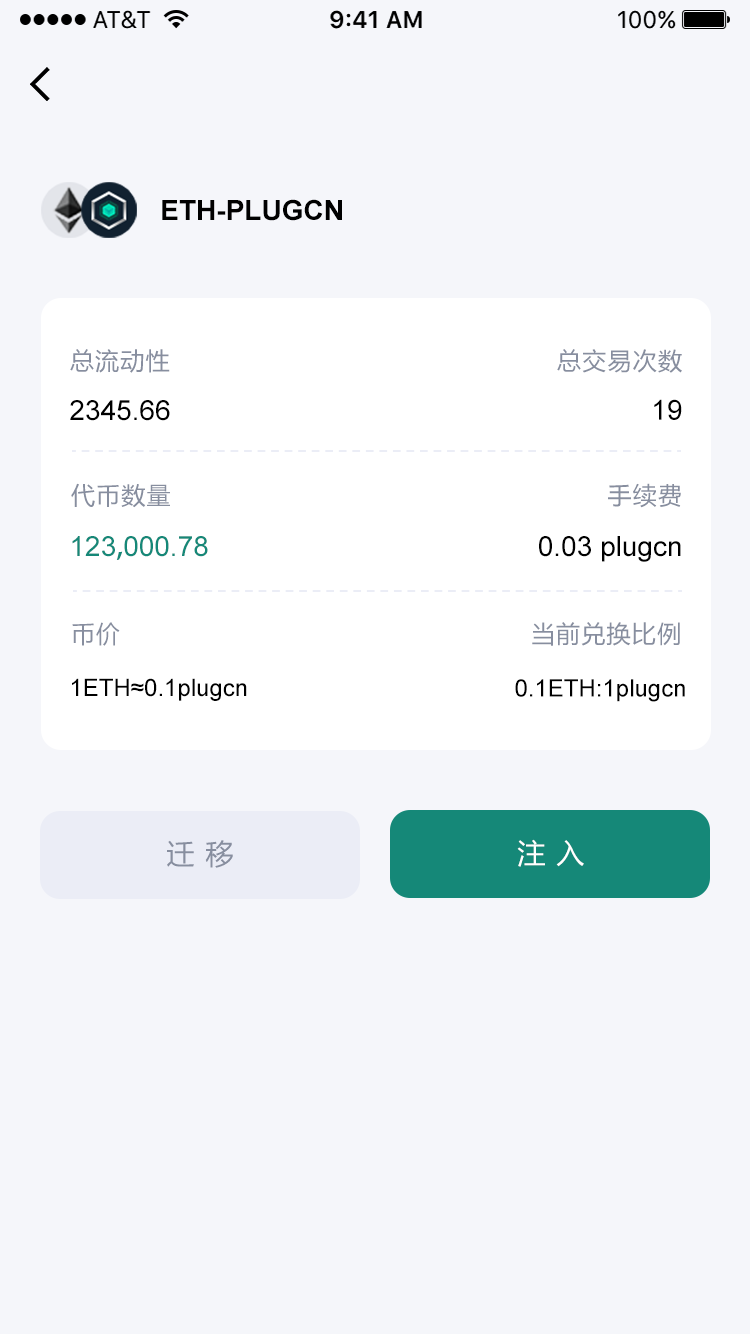
<style>
.page{position:relative;width:750px;height:1334px;background:#f5f6fa}
.page>*{position:absolute;margin:0}
.t1{font:28px "Arial-BoldMT";color:#000000}
.t2{font:24px "MicrosoftYaHei";letter-spacing:0.05em;color:#878e9f}
.t3{font:28px "ArialMT";color:#000000}
.t4{font:28px "ArialMT";color:#158878}
.t5{font:28px "AdobeHeitiStd-Regular";color:#158878}
.t6{font:24px "ArialMT";color:#000000}
.t7{font:28px "MicrosoftYaHei";letter-spacing:0.05em;color:#878e9f}
.t8{font:28px "MicrosoftYaHei";letter-spacing:0.05em;color:#ffffff}
</style>
<div class="page">
<p class="t1" style="left:162px;top:199px;width:180px;height:22px">ETH-PLUGCN</p>
<p class="t2" style="left:70px;top:349px;width:100px;height:24px">总流动性</p>
<p class="t2" style="left:557px;top:349px;width:125px;height:24px">总交易次数</p>
<p class="t3" style="left:70px;top:400px;width:100px;height:21px">2345.66</p>
<p class="t3" style="left:654px;top:399px;width:28px;height:21px">19</p>
<p class="t2" style="left:71px;top:483px;width:99px;height:25px">代币数量</p>
<p class="t2" style="left:608px;top:483px;width:73px;height:25px">手续费</p>
<p class="t4" style="left:72px;top:536px;width:136px;height:24px">123<span class="t5">,</span>000.78</p>
<p class="t3" style="left:539px;top:536px;width:142px;height:26px">0.03 plugcn</p>
<p class="t2" style="left:72px;top:622px;width:48px;height:24px">币价</p>
<p class="t2" style="left:532px;top:622px;width:148px;height:24px">当前兑换比例</p>
<p class="t6" style="left:72px;top:678px;width:175px;height:23px">1ETH≈0.1plugcn</p>
<p class="t6" style="left:515px;top:679px;width:170px;height:23px">0.1ETH:1plugcn</p>
<p class="t7" style="left:167px;top:840px;width:66px;height:28px">迁 移</p>
<p class="t8" style="left:517px;top:839px;width:67px;height:28px">注 入</p>
</div>
